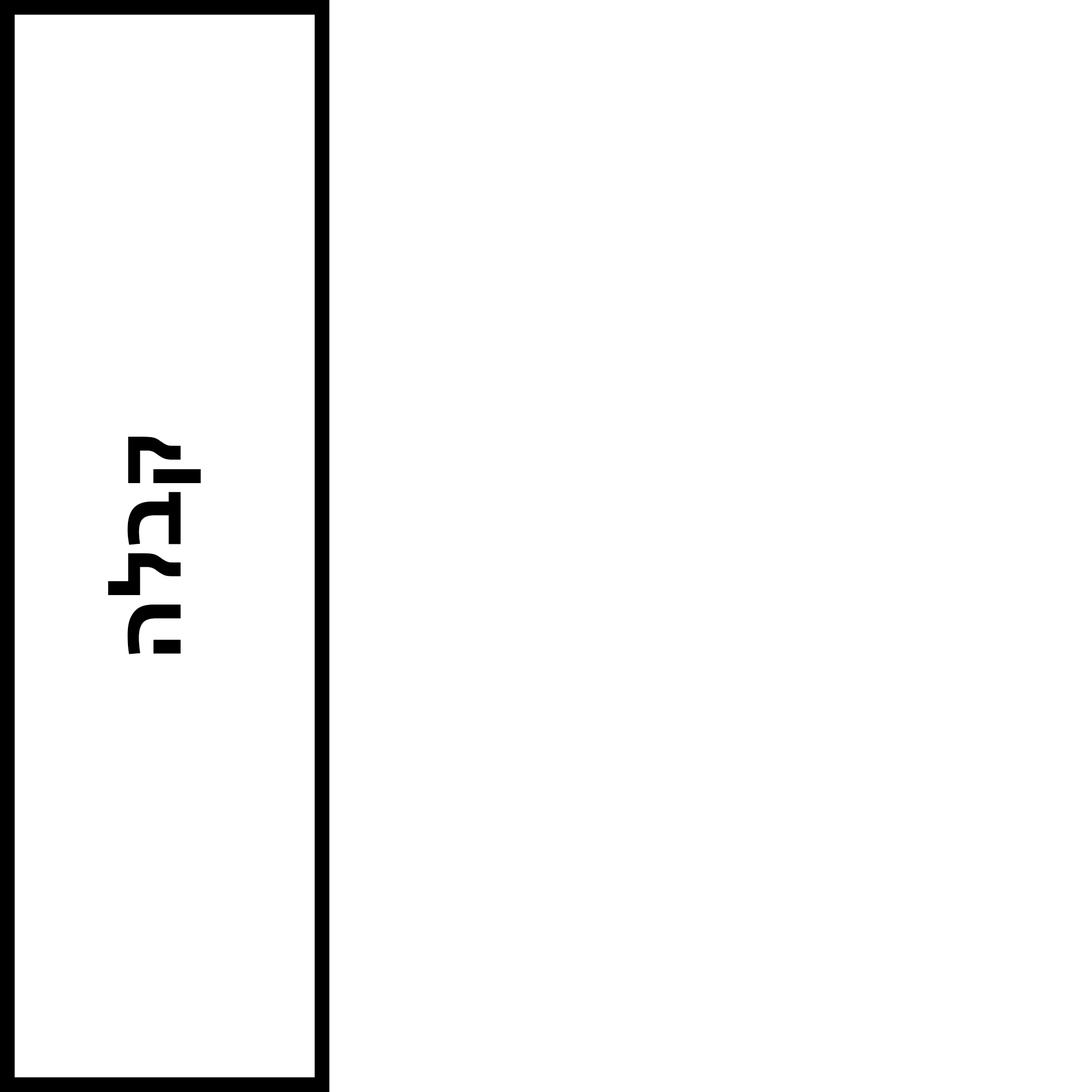
<style>
.page{position:relative;width:1092px;height:1092px;background:#ffffff}
.page>*{position:absolute;margin:0}
.t1{font:101.3px "Arial-BoldMT";color:#000000}
</style>
<div class="page">
<p class="t1" style="left:108px;top:437px;width:93px;height:217px;rotate:-90deg">קבלה</p>
</div>
